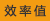
<style>
.page{position:relative;width:50px;height:21px;background:#f39c12}
.page>*{position:absolute;margin:0}
.t1{font:11.7px "MicrosoftYaHei";letter-spacing:0.24em;color:#333333;font-weight:bold}
</style>
<div class="page">
<p class="t1" style="left:4px;top:4px;width:42px;height:13px">效率值</p>
</div>
